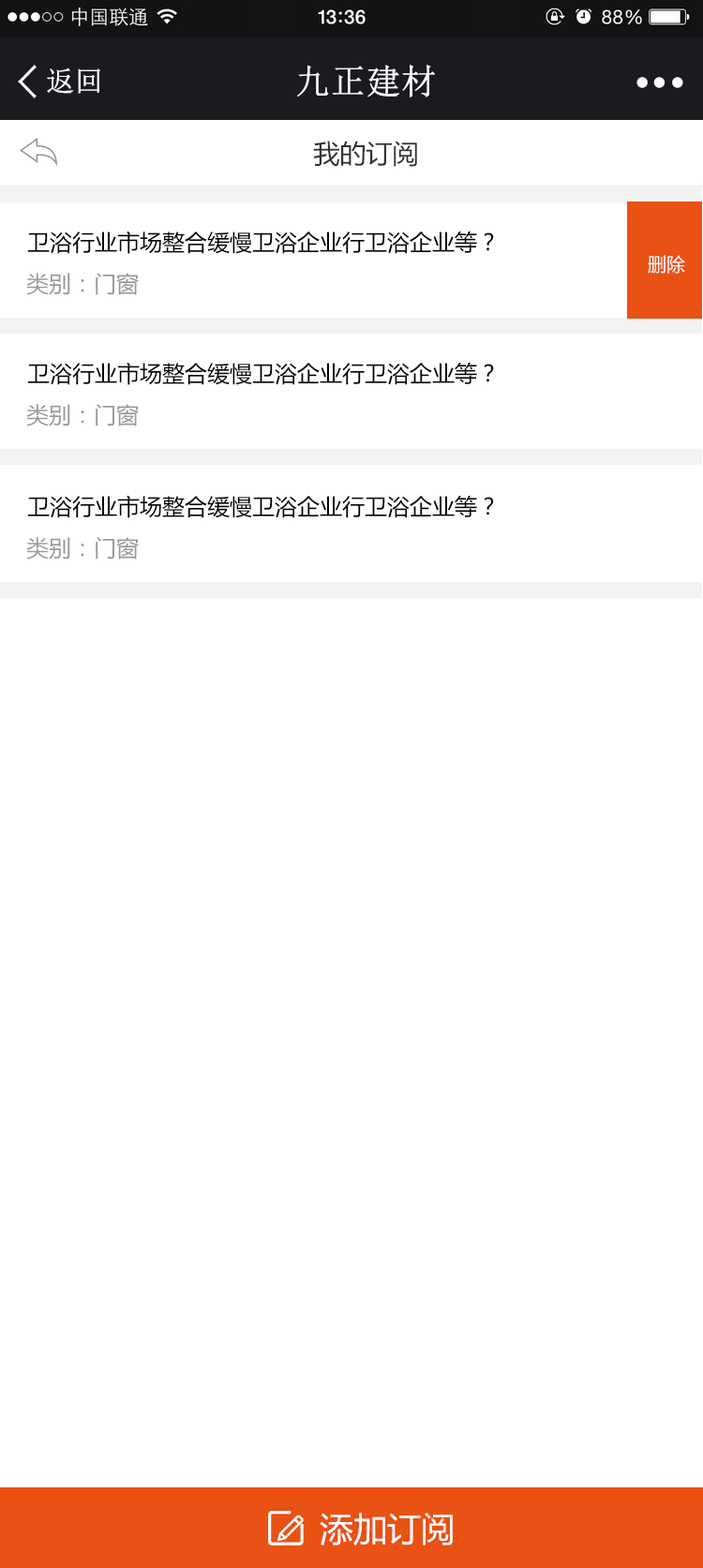
<style>
.page{position:relative;width:703px;height:1568px;background:#ffffff}
.page>*{position:absolute;margin:0}
.t1{font:34.4px "NSimSun";color:#ffffff;font-weight:bold}
.t2{font:28.1px "NSimSun";color:#ffffff;font-weight:bold}
.t3{font:26.2px "MicrosoftYaHei";color:#333333}
.t4{font:26.2px "MicrosoftYaHei";color:#333333;font-weight:bold}
.t5{font:22.5px "MicrosoftYaHei";color:#000000}
.t6{font:18.7px "MicrosoftYaHei";color:#ffffff}
.t7{font:22.5px "MicrosoftYaHei";color:#999999}
.t8{font:33.7px "MicrosoftYaHei";color:#ffffff}
</style>
<div class="page">
<p class="t1" style="left:297px;top:65px;width:138px;height:32px">九正建材</p>
<p class="t2" style="left:47px;top:67px;width:53px;height:27px">返回</p>
<p class="t3" style="left:313px;top:141px;width:104px;height:26px"><span class="t4"><br></span>我的订阅</p>
<p class="t5" style="left:27px;top:231px;width:467px;height:23px">卫浴行业市场整合缓慢卫浴企业行卫浴企业等？</p>
<p class="t6" style="left:648px;top:255px;width:37px;height:19px">删除</p>
<p class="t7" style="left:26px;top:273px;width:113px;height:22px">类别：门窗</p>
<p class="t5" style="left:27px;top:362px;width:467px;height:23px">卫浴行业市场整合缓慢卫浴企业行卫浴企业等？</p>
<p class="t7" style="left:26px;top:404px;width:113px;height:22px">类别：门窗</p>
<p class="t5" style="left:27px;top:495px;width:467px;height:23px">卫浴行业市场整合缓慢卫浴企业行卫浴企业等？</p>
<p class="t7" style="left:26px;top:537px;width:113px;height:23px">类别：门窗</p>
<p class="t8" style="left:320px;top:1513px;width:133px;height:33px">添加订阅</p>
</div>
